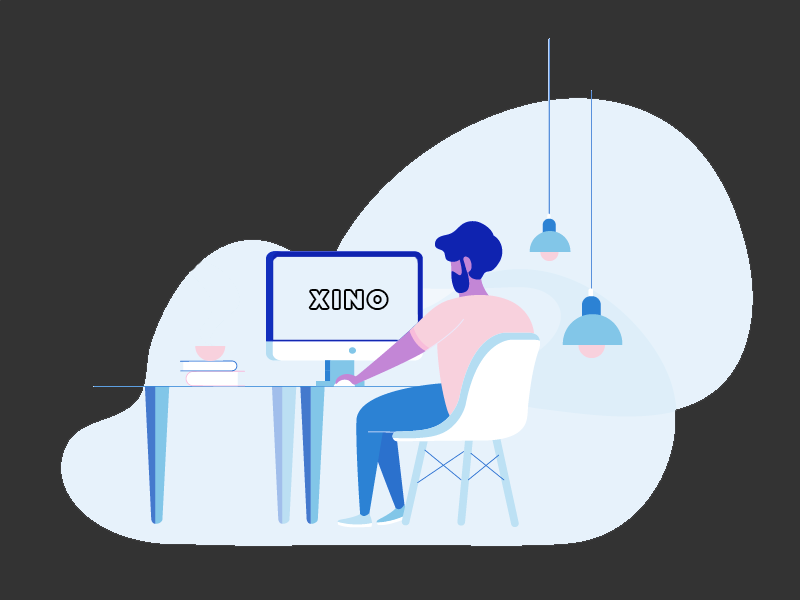
<style>
.page{position:relative;width:800px;height:600px;background:#333333}
.page>*{position:absolute;margin:0}
.t1{font:24px "GothamBlack";letter-spacing:0.18em;color:#e7f2fb}
</style>
<div class="page">
<p class="t1" style="left:310px;top:291px;width:77px;height:17px">XINO</p>
</div>
